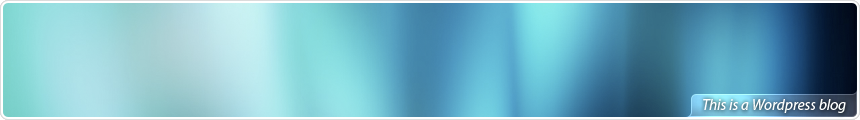
<style>
.page{position:relative;width:860px;height:120px}
.page>*{position:absolute;margin:0}
.t1{font:15.3px "MyriadPro-It";color:#ffffff}
</style>
<div class="page">
<p class="t1" style="left:703px;top:99px;width:143px;height:14px">This is a Wordpress blog</p>
</div>
